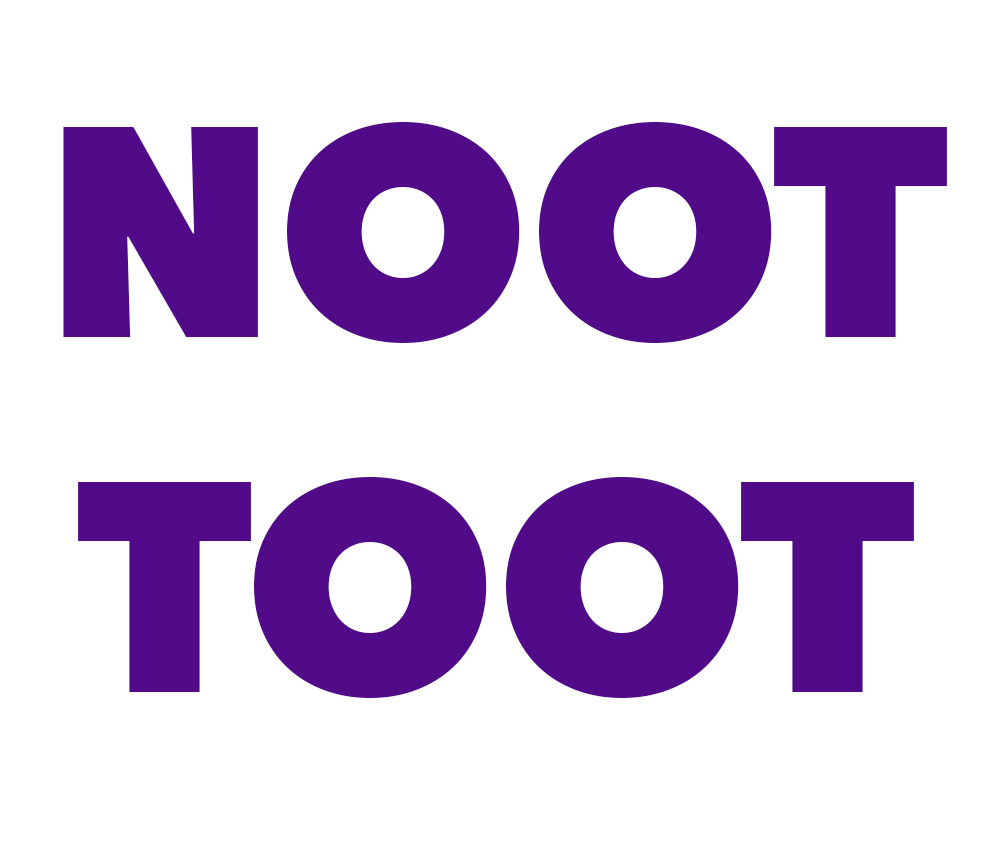
<style>
.page{position:relative;width:985px;height:844px;background:#ffffff}
.page>*{position:absolute;margin:0}
.t1{font:296.3px "AvenirNext-Heavy";color:#510a88}
</style>
<div class="page">
<p class="t1" style="left:63px;top:122px;width:884px;height:576px;text-align:center">NOOT <br>TOOT</p>
</div>
